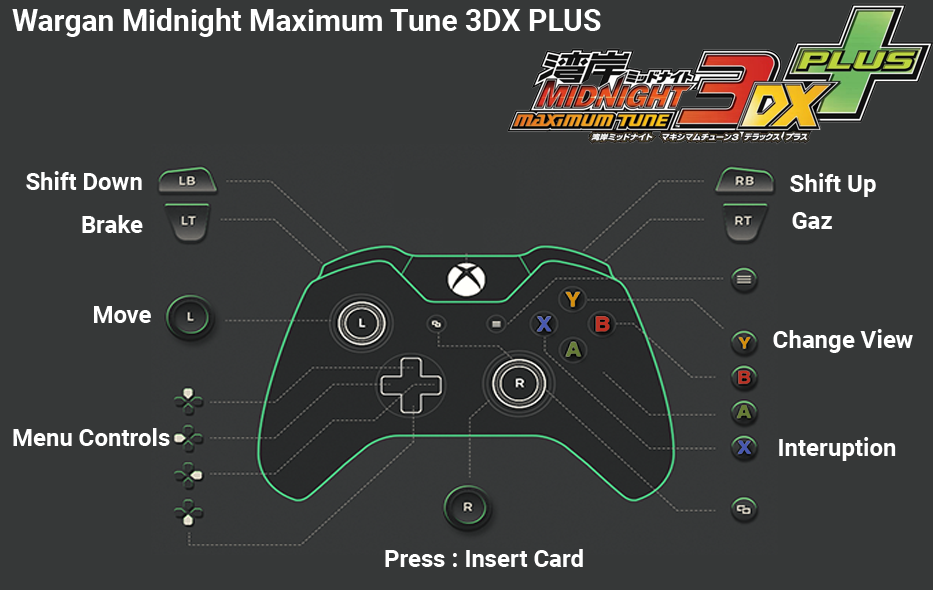
<style>
.page{position:relative;width:933px;height:590px;background:#363838}
.page>*{position:absolute;margin:0}
.t1{font:30px "Roboto-Bold";color:#ffffff}
.t2{font:24px "Roboto-Bold";color:#ffffff}
</style>
<div class="page">
<p class="t1" style="left:12px;top:8px;width:589px;height:29px">Wargan Midnight Maximum Tune 3DX PLUS</p>
<p class="t2" style="left:26px;top:171px;width:116px;height:19px">Shift Down</p>
<p class="t2" style="left:790px;top:173px;width:86px;height:24px">Shift Up</p>
<p class="t2" style="left:82px;top:215px;width:61px;height:18px">Brake</p>
<p class="t2" style="left:792px;top:212px;width:40px;height:17px">Gaz</p>
<p class="t2" style="left:94px;top:306px;width:57px;height:17px">Move</p>
<p class="t2" style="left:773px;top:329px;width:140px;height:24px">Change View</p>
<p class="t2" style="left:13px;top:428px;width:157px;height:18px">Menu Controls</p>
<p class="t2" style="left:779px;top:437px;width:117px;height:24px">Interuption</p>
<p class="t2" style="left:385px;top:549px;width:198px;height:18px">Press : Insert Card</p>
</div>
